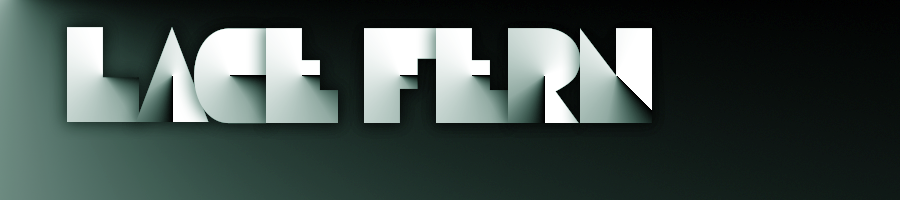
<style>
.page{position:relative;width:900px;height:200px}
.page>*{position:absolute;margin:0}
.t1{font:150px "DiscoDeckCondensed"}
</style>
<div class="page">
<p class="t1" style="left:67px;top:27px;width:72px;height:95px">L</p>
<p class="t1" style="left:136px;top:27px;width:73px;height:95px">a</p>
<p class="t1" style="left:194px;top:28px;width:73px;height:96px">c</p>
<p class="t1" style="left:266px;top:28px;width:72px;height:95px">E</p>
<p class="t1" style="left:364px;top:28px;width:73px;height:95px">F</p>
<p class="t1" style="left:436px;top:28px;width:72px;height:95px">E</p>
<p class="t1" style="left:508px;top:28px;width:72px;height:95px">R</p>
<p class="t1" style="left:580px;top:28px;width:72px;height:95px">N</p>
</div>
